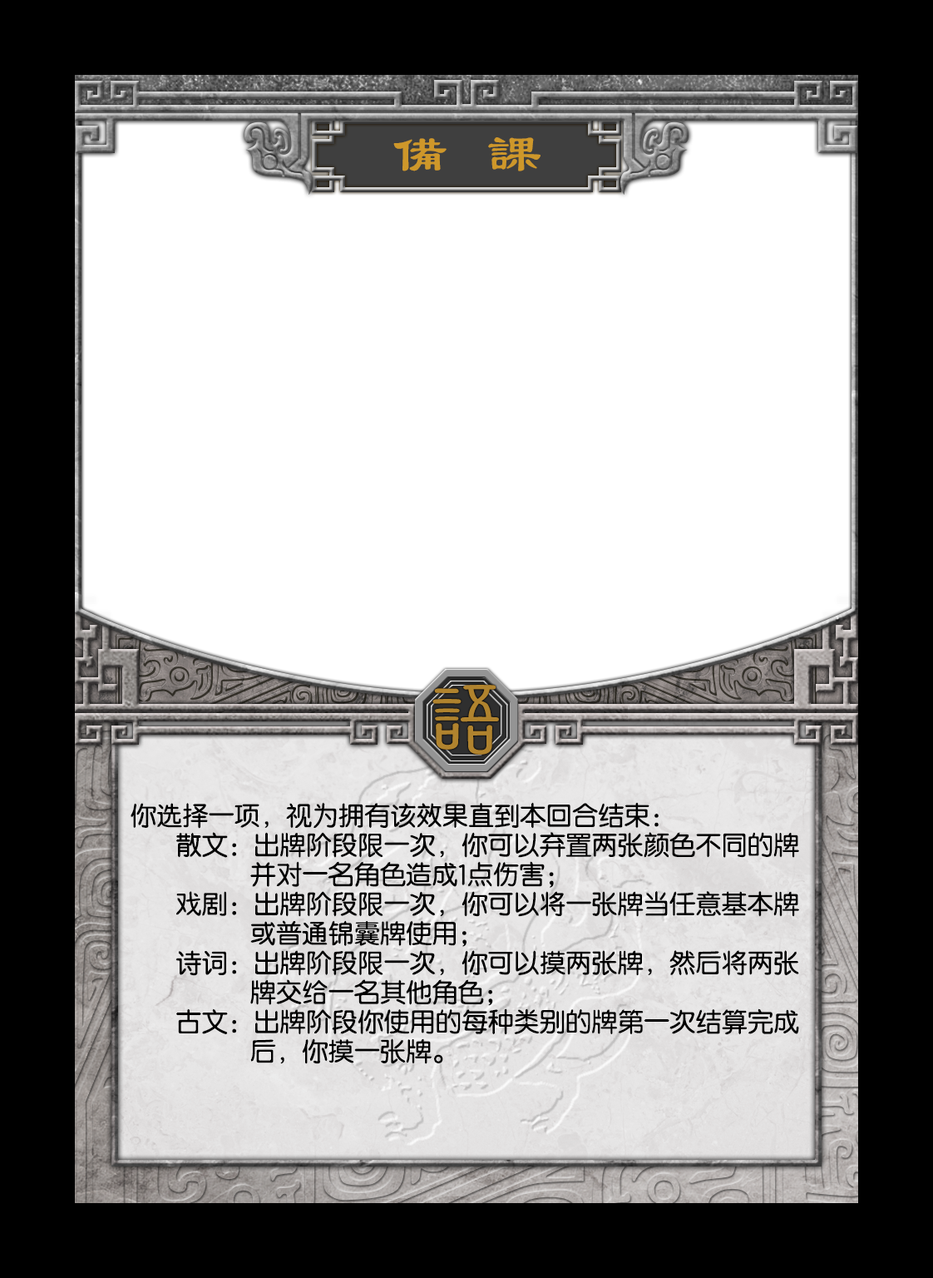
<style>
.page{position:relative;width:933px;height:1278px;background:#ffffff}
.page>*{position:absolute;margin:0}
.t1{font:55.5px "FZLSK--GBK1-0";letter-spacing:0.7em;color:#ce972a}
.t2{font:87.1px "DFNewChuan-W5-WINP-BF";color:#b0832e;scale:1.2 1}
.t3{font:26px/29.5px "FZY3--GB1-4";color:#0b0306}
</style>
<div class="page">
<p class="t1" style="left:393px;top:137px;width:148px;height:34px">備課</p>
<p class="t2" style="left:433px;top:685px;width:66px;height:69px">語</p>
<p class="t3" style="left:131px;top:802px;width:668px;height:262px">你选择一项，视为拥有该效果直到本回合结束：<br>       散文：出牌阶段限一次，你可以弃置两张颜色不同的牌<br>    并对一名角色造成1点伤害；<br>       戏剧：出牌阶段限一次，你可以将一张牌当任意基本牌<br>    或普通锦囊牌使用；<br>       诗词：出牌阶段限一次，你可以摸两张牌，然后将两张<br>    牌交给一名其他角色；<br>       古文：出牌阶段你使用的每种类别的牌第一次结算完成<br>    后，你摸一张牌。</p>
</div>
